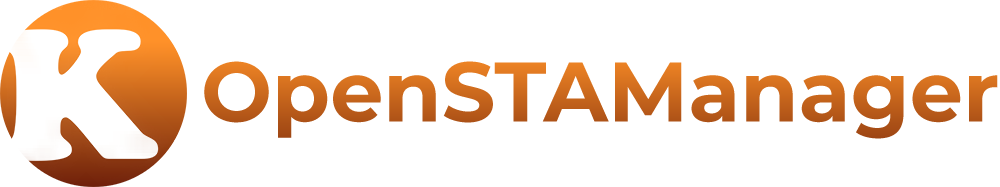
<style>
.page{position:relative;width:1000px;height:187px;background:#ffffff}
.page>*{position:absolute;margin:0}
.t1{font:84.4px "Montserrat-Bold";color:#c8661c}
</style>
<div class="page">
<p class="t1" style="left:204px;top:61px;width:794px;height:78px">OpenSTAManager</p>
</div>
